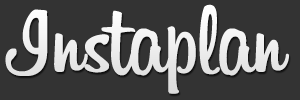
<style>
.page{position:relative;width:300px;height:100px;background:#333333}
.page>*{position:absolute;margin:0}
.t1{font:100px "Billabong";color:#ffffff}
</style>
<div class="page">
<p class="t1" style="left:5px;top:4px;width:284px;height:90px">Instaplan</p>
</div>
